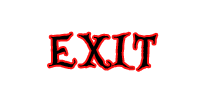
<style>
.page{position:relative;width:200px;height:100px;background:#ffffff}
.page>*{position:absolute;margin:0}
.t1{font:48px "AliceinWonderland";letter-spacing:0.075em;color:#000000}
</style>
<div class="page">
<p class="t1" style="left:49px;top:33px;width:108px;height:37px">EXIT</p>
</div>
